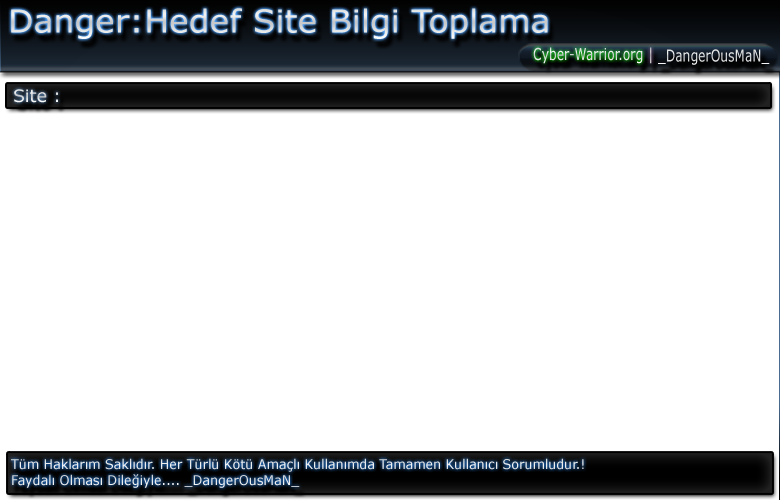
<style>
.page{position:relative;width:780px;height:500px;background:#ffffff}
.page>*{position:absolute;margin:0}
.t1{font:31.5px "Verdana";color:#e0e1e1;scale:1.05 1}
.t2{font:16.6px "Verdana";color:#dfe0e0;scale:0.74 1}
.t3{font:16.6px "Verdana";scale:0.74 1}
.t4{font:17.3px "Verdana"}
.t5{font:13.5px "Verdana";color:#ececec;scale:0.94 1}
</style>
<div class="page">
<p class="t1" style="left:11px;top:8px;width:537px;height:31px">Danger:Hedef Site Bilgi Toplama</p>
<p class="t2" style="left:533px;top:47px;width:110px;height:17px">Cyber-Warrior.org</p>
<p class="t3" style="left:650px;top:47px;width:2px;height:17px">|</p>
<p class="t3" style="left:658px;top:49px;width:112px;height:16px">_DangerOusMaN_</p>
<p class="t4" style="left:14px;top:89px;width:44px;height:14px">Site :</p>
<p class="t5" style="left:11px;top:458px;width:573px;height:30px">Tüm Haklarım Saklıdır. Her Türlü Kötü Amaçlı Kullanımda Tamamen Kullanıcı Sorumludur.!<br>Faydalı Olması Dileğiyle.... _DangerOusMaN_</p>
</div>
